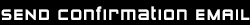
<style>
.page{position:relative;width:250px;height:25px;background:#000000}
.page>*{position:absolute;margin:0}
.t1{font:17.5px "ZeroTwos";letter-spacing:0.1em;color:#ffffff;scale:0.96 1}
</style>
<div class="page">
<p class="t1" style="left:1px;top:6px;width:249px;height:14px">SEND Confirmation EMAIL</p>
</div>
